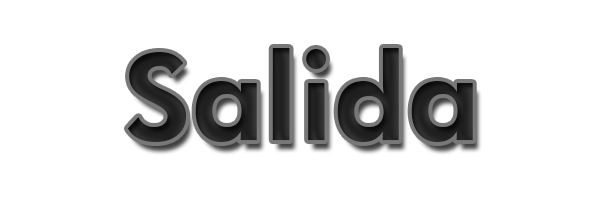
<style>
.page{position:relative;width:600px;height:200px;background:#ffffff}
.page>*{position:absolute;margin:0}
.t1{font:120px "FuturaBT-Heavy";color:#212121}
</style>
<div class="page">
<p class="t1" style="left:127px;top:48px;width:346px;height:94px">Salida</p>
</div>
